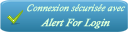
<style>
.page{position:relative;width:128px;height:32px}
.page>*{position:absolute;margin:0}
.t1{font:10px/15px "CalistoMT-Italic";color:#dbffd9;font-weight:bold;font-style:italic}
.t2{font:11px/15px "CalistoMT-Italic";color:#dbffd9;font-weight:bold;font-style:italic}
</style>
<div class="page">
<p class="t1" style="left:27px;top:4px;width:99px;height:25px;text-align:center">Connexion sécurisée avec<br><span class="t2">Alert For Login</span></p>
</div>
